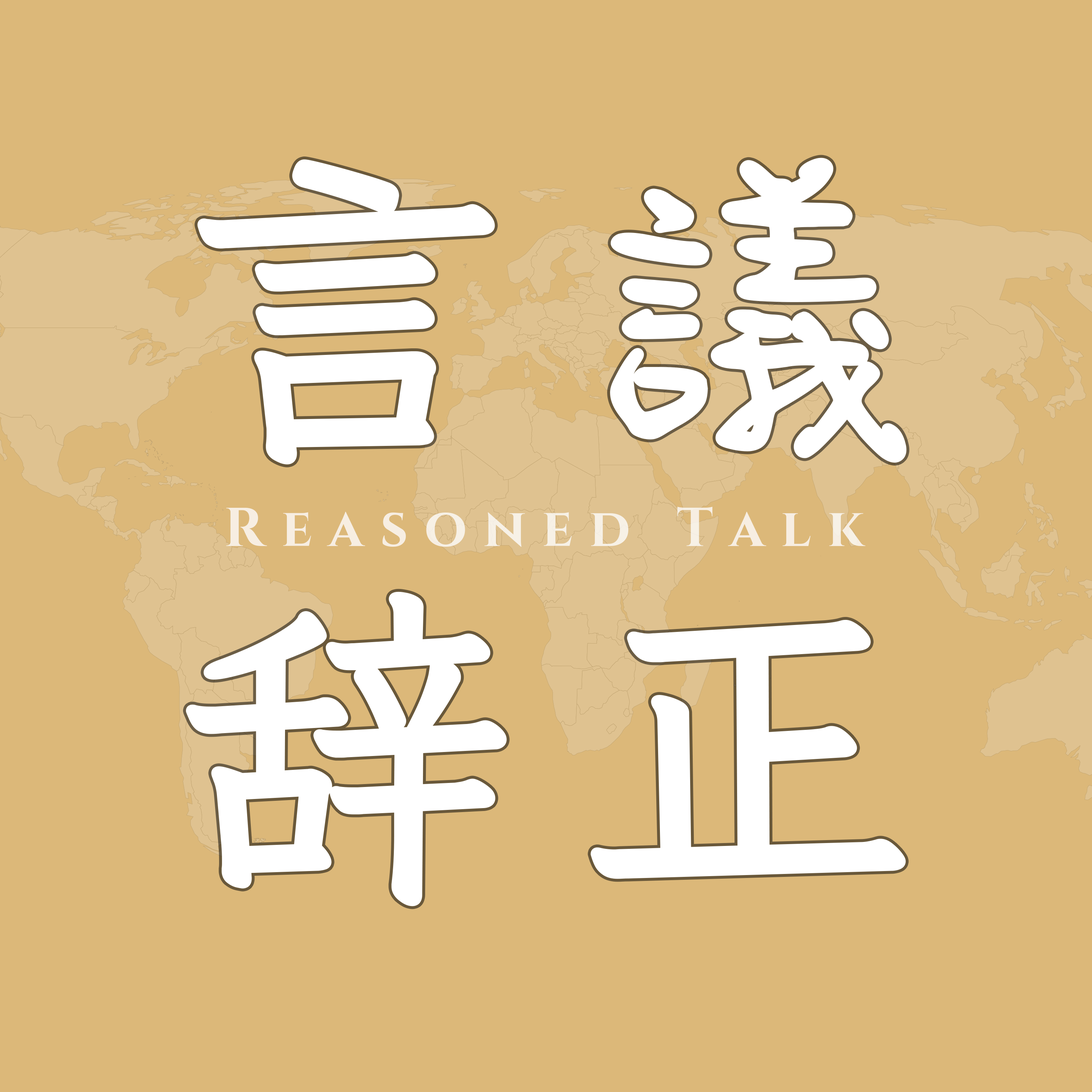
<style>
.page{position:relative;width:1092px;height:1092px;background:#dcb879}
.page>*{position:absolute;margin:0}
.t1{font:333.7px "Iansui-Regular";letter-spacing:0.3em;color:#ffffff;font-weight:bold}
.t2{font:333.7px "JasonHandwriting5-Regular";letter-spacing:0.3em;color:#ffffff;font-weight:bold}
.t3{font:54.6px "CinzelRoman-Bold";letter-spacing:0.3em;color:#f7eee2}
</style>
<div class="page">
<p class="t1" style="left:197px;top:159px;width:298px;height:305px">言</p>
<p class="t2" style="left:610px;top:158px;width:297px;height:305px">議</p>
<p class="t3" style="left:226px;top:507px;width:640px;height:40px">Reasoned Talk</p>
<p class="t1" style="left:186px;top:591px;width:321px;height:315px">辞</p>
<p class="t1" style="left:590px;top:620px;width:316px;height:259px">正</p>
</div>
